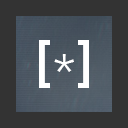
<style>
.page{position:relative;width:128px;height:128px;background:#333333}
.page>*{position:absolute;margin:0}
.t1{font:49px "Purista";letter-spacing:-0.025em;color:#ffffff}
</style>
<div class="page">
<p class="t1" style="left:54px;top:54px;width:20px;height:18px">*</p>
</div>
